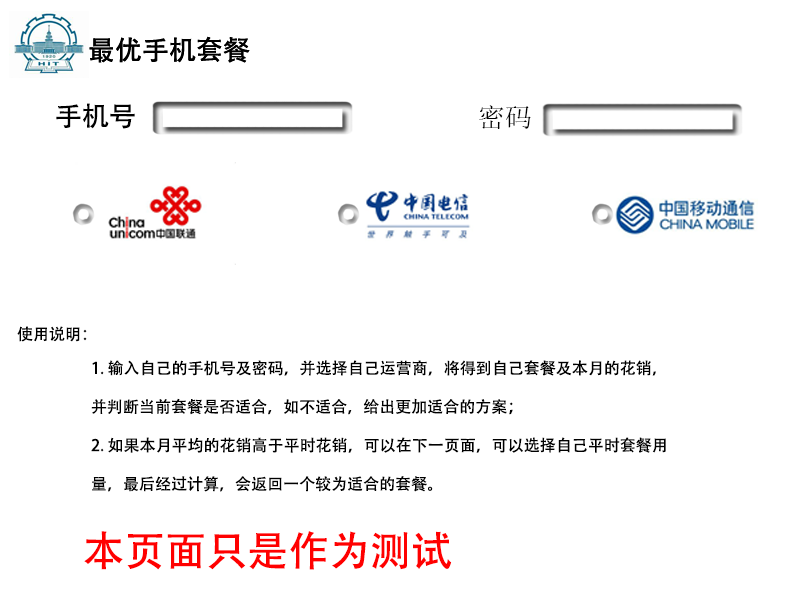
<style>
.page{position:relative;width:800px;height:600px;background:#ffffff}
.page>*{position:absolute;margin:0}
.t1{font:27px "AdobeHeitiStd-Regular";color:#000000}
.t2{font:27px "SimSun";color:#000000}
.t3{font:16px "AdobeHeitiStd-Regular";color:#000000}
.t4{font:16px/30px "AdobeHeitiStd-Regular";color:#000000}
.t5{font:41px "AdobeHeitiStd-Regular";color:#ff0000}
</style>
<div class="page">
<p class="t1" style="left:89px;top:36px;width:161px;height:27px">最优手机套餐</p>
<p class="t1" style="left:89px;top:36px;width:161px;height:27px">最优手机套餐</p>
<p class="t1" style="left:56px;top:103px;width:79px;height:26px">手机号</p>
<p class="t2" style="left:479px;top:105px;width:52px;height:24px">密码</p>
<p class="t3" style="left:17px;top:326px;width:70px;height:16px">使用说明：</p>
<p class="t4" style="left:91px;top:360px;width:575px;height:132px">1. 输入自己的手机号及密码，并选择自己运营商，将得到自己套餐及本月的花销，<br>并判断当前套餐是否适合，如不适合，给出更加适合的方案；<br>2. 如果本月平均的花销高于平时花销，可以在下一页面，可以选择自己平时套餐用<br>量，最后经过计算，会返回一个较为适合的套餐。</p>
<p class="t5" style="left:84px;top:531px;width:368px;height:39px">本页面只是作为测试</p>
</div>
